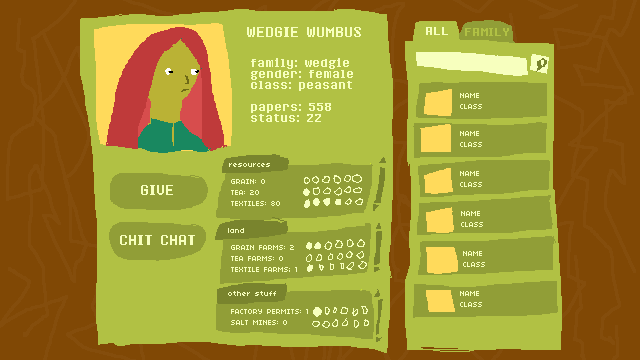
<style>
.page{position:relative;width:640px;height:360px;background:#804805}
.page>*{position:absolute;margin:0}
.t1{font:12px "8bitoperatorRegular";color:#f7ffbe}
.t2{font:10px "8bitoperatorRegular";color:#f7ffbe}
.t3{font:10px "8bitoperatorRegular";color:#b1c144}
.t4{font:10px/11px "8bitoperatorRegular";color:#f7ffbe}
.t5{font:8px/11px "04b03";color:#f7ffbe}
.t6{font:8px "04b03";color:#f7ffbe}
</style>
<div class="page">
<p class="t1" style="left:247px;top:27px;width:114px;height:10px">WEDGIE WUMBUS</p>
<p class="t2" style="left:426px;top:27px;width:22px;height:8px">ALL</p>
<p class="t3" style="left:465px;top:28px;width:44px;height:8px">FAMILY</p>
<p class="t4" style="left:251px;top:58px;width:102px;height:64px">family: wedgie<br>gender: female<br>class: peasant<br><br>papers: 558<br>status: 22</p>
<p class="t5" style="left:460px;top:93px;width:22px;height:16px">NAME<br>CLASS</p>
<p class="t5" style="left:460px;top:131px;width:22px;height:16px">NAME<br>CLASS</p>
<p class="t6" style="left:229px;top:163px;width:41px;height:4px">resources</p>
<p class="t1" style="left:141px;top:185px;width:32px;height:10px">GIVE</p>
<p class="t5" style="left:231px;top:179px;width:49px;height:27px">GRAIN: 0<br>TEA: 20<br>TEXTILES: 80</p>
<p class="t6" style="left:228px;top:228px;width:16px;height:5px">land</p>
<p class="t1" style="left:120px;top:235px;width:75px;height:10px">CHIT CHAT</p>
<p class="t5" style="left:231px;top:245px;width:66px;height:27px">GRAIN FARMS: 2<br>TEA FARMS: 0<br>TEXTILE FARMS; 1</p>
<p class="t6" style="left:228px;top:291px;width:48px;height:5px">other stuff</p>
<p class="t5" style="left:231px;top:309px;width:77px;height:16px">FACTORY PERMITS: 1<br>SALT MINES: 0</p>
</div>
